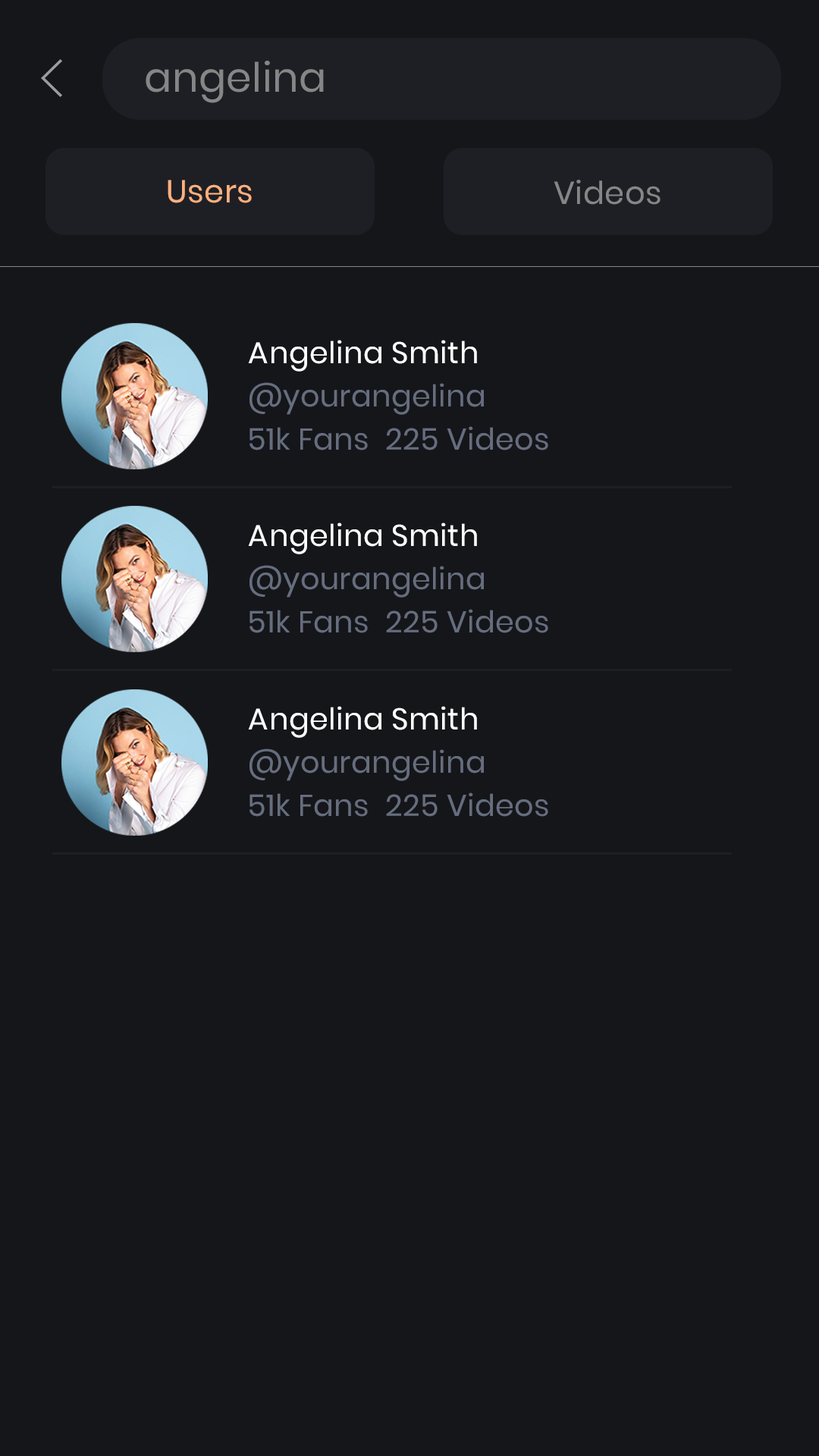
<style>
.page{position:relative;width:819px;height:1456px;background:#15161a}
.page>*{position:absolute;margin:0}
.t1{font:40.6px "Poppins-Regular";letter-spacing:0.01em;color:#868686}
.t2{font:31.6px "Poppins-Regular";letter-spacing:0.01em;color:#ffb07f}
.t3{font:31.6px "Poppins-Regular";letter-spacing:0.01em;color:#868686}
.t4{font:30px "Poppins-Regular";letter-spacing:0.01em;color:#ffffff}
.t5{font:30px "Poppins-Regular";letter-spacing:0.01em;color:#666d7e}
</style>
<div class="page">
<p class="t1" style="left:146px;top:61px;width:178px;height:42px">angelina</p>
<p class="t2" style="left:168px;top:180px;width:84px;height:23px">Users</p>
<p class="t3" style="left:554px;top:180px;width:106px;height:25px">Videos</p>
<p class="t4" style="left:248px;top:340px;width:229px;height:32px">Angelina Smith</p>
<p class="t5" style="left:249px;top:382px;width:235px;height:33px">@yourangelina</p>
<p class="t5" style="left:249px;top:426px;width:299px;height:24px">51k Fans  225 Videos</p>
<p class="t4" style="left:248px;top:522px;width:229px;height:32px">Angelina Smith</p>
<p class="t5" style="left:249px;top:565px;width:235px;height:33px">@yourangelina</p>
<p class="t5" style="left:249px;top:609px;width:299px;height:24px">51k Fans  225 Videos</p>
<p class="t4" style="left:248px;top:706px;width:229px;height:32px">Angelina Smith</p>
<p class="t5" style="left:249px;top:748px;width:235px;height:33px">@yourangelina</p>
<p class="t5" style="left:249px;top:792px;width:299px;height:25px">51k Fans  225 Videos</p>
</div>
